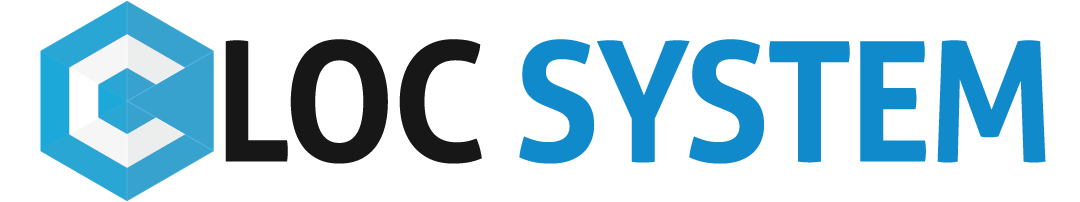
<style>
.page{position:relative;width:1080px;height:202px;background:#ffffff}
.page>*{position:absolute;margin:0}
.t1{font:166.9px "Aller-Bold";letter-spacing:-0.025em;color:#118acb;scale:0.93 1}
.t2{font:166.9px "Aller-Bold";letter-spacing:-0.025em;color:#171717;scale:0.93 1}
</style>
<div class="page">
<p class="t1" style="left:225px;top:39px;width:821px;height:125px"><span class="t2">LOC </span>SYSTEM</p>
</div>
